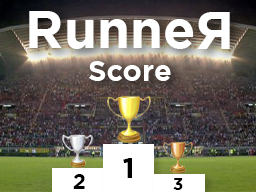
<style>
.page{position:relative;width:256px;height:192px}
.page>*{position:absolute;margin:0}
.t1{font:53.3px "Gotham-Bold";color:#ffffff}
.t2{font:29.2px "Gotham-Bold";color:#ffffff}
.t3{font:29.2px "Gotham-Bold";color:#000000}
.t4{font:20.9px "Gotham-Bold";color:#000000}
.t5{font:16.7px "Gotham-Bold";color:#000000}
</style>
<div class="page">
<p class="t1" style="left:29px;top:11px;width:165px;height:38px">Runne</p>
<p class="t1" style="left:197px;top:12px;width:33px;height:37px;rotate:180deg">R</p>
<p class="t2" style="left:89px;top:61px;width:82px;height:20px">Score</p>
<p class="t3" style="left:123px;top:158px;width:9px;height:20px">1</p>
<p class="t4" style="left:73px;top:174px;width:12px;height:15px">2</p>
<p class="t5" style="left:173px;top:178px;width:10px;height:12px">3</p>
</div>
